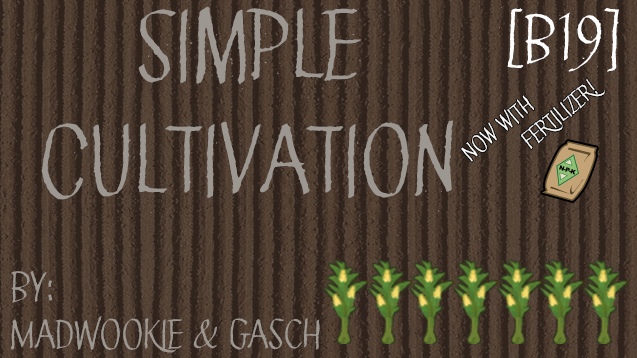
<style>
.page{position:relative;width:637px;height:358px}
.page>*{position:absolute;margin:0}
.t1{font:96px "GreenQueen";color:#9d9792}
.t2{font:64px "GreenQueen";color:#fffefe}
.t3{font:24px "GreenQueen";color:#fffefe}
.t4{font:40px "GreenQueen";color:#9d9792}
</style>
<div class="page">
<p class="t1" style="left:41px;top:6px;width:412px;height:228px;text-align:center">Simple<br>Cultivation</p>
<p class="t2" style="left:499px;top:7px;width:120px;height:65px">[B19]</p>
<p class="t3" style="left:461px;top:78px;width:144px;height:84px;text-align:center;rotate:-40deg">Now with<br>                   fertilizer!</p>
<p class="t4" style="left:11px;top:271px;width:309px;height:82px">By:<br>MadWookie &amp; Gasch</p>
</div>
